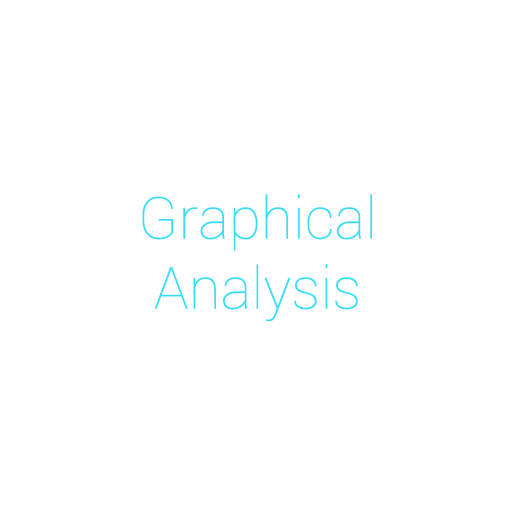
<style>
.page{position:relative;width:512px;height:512px;background:#ffffff}
.page>*{position:absolute;margin:0}
.t1{font:58.3px "Roboto-Thin";color:#33dff9}
</style>
<div class="page">
<p class="t1" style="left:142px;top:194px;width:230px;height:128px;text-align:center">Graphical<br>Analysis</p>
</div>
